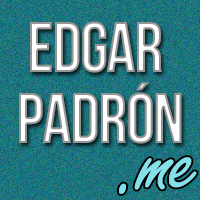
<style>
.page{position:relative;width:200px;height:200px}
.page>*{position:absolute;margin:0}
.t1{font:71.5px/71.5px "BebasNeue-Bold";letter-spacing:-0.025em}
.t2{font:100px "FreestyleScript-Regular";letter-spacing:-0.025em;color:#86e0e9}
</style>
<div class="page">
<p class="t1" style="left:19px;top:21px;width:163px;height:123px;text-align:center">EDGAR <br>PADRÓN</p>
<p class="t2" style="left:119px;top:157px;width:78px;height:37px">.me</p>
</div>
